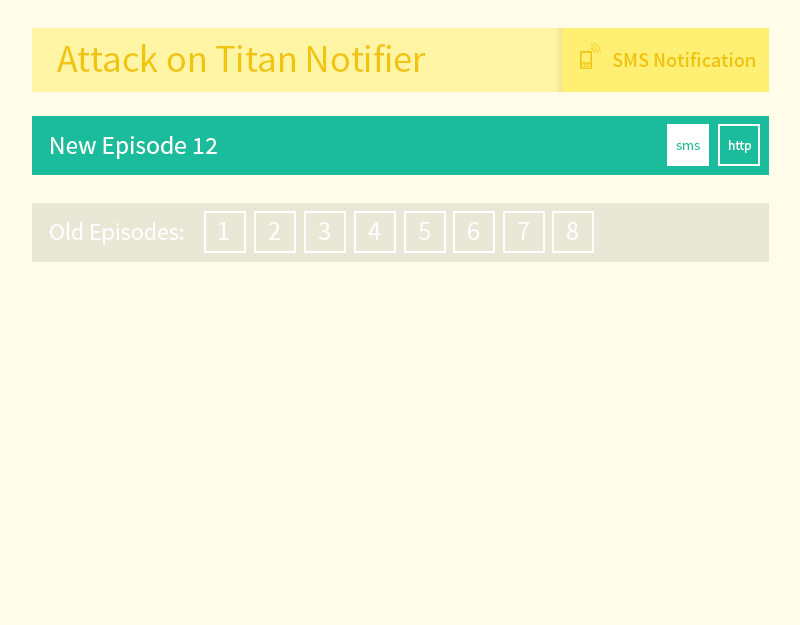
<style>
.page{position:relative;width:800px;height:625px;background:#fffde9}
.page>*{position:absolute;margin:0}
.t1{font:38.5px "SourceSansPro-Regular";color:#f1c40f}
.t2{font:20.3px "SourceSansPro-Semibold";color:#f1c40f}
.t3{font:25.2px "SourceSansPro-Regular";color:#ffffff}
.t4{font:14px "SourceSansPro-Regular";color:#1abc9c}
.t5{font:14px "SourceSansPro-Regular";color:#ffffff;scale:0.94 1}
.t6{font:24.3px "SourceSansPro-Regular";color:#ffffff}
.t7{font:26.9px "SourceSansPro-Regular";color:#ffffff}
</style>
<div class="page">
<p class="t1" style="left:57px;top:44px;width:369px;height:28px">Attack on Titan Notifier</p>
<p class="t2" style="left:613px;top:52px;width:142px;height:15px">SMS Notification</p>
<p class="t3" style="left:51px;top:136px;width:166px;height:23px">New Episode 12</p>
<p class="t4" style="left:676px;top:143px;width:24px;height:7px">sms</p>
<p class="t5" style="left:729px;top:140px;width:22px;height:13px">http</p>
<p class="t6" style="left:50px;top:222px;width:134px;height:23px">Old Episodes:</p>
<p class="t7" style="left:219px;top:222px;width:10px;height:18px">1</p>
<p class="t7" style="left:268px;top:222px;width:12px;height:18px">2</p>
<p class="t7" style="left:318px;top:222px;width:12px;height:18px">3</p>
<p class="t7" style="left:368px;top:222px;width:13px;height:18px">4</p>
<p class="t7" style="left:418px;top:222px;width:12px;height:18px">5</p>
<p class="t7" style="left:468px;top:222px;width:11px;height:18px">6</p>
<p class="t7" style="left:518px;top:222px;width:11px;height:18px">7</p>
<p class="t7" style="left:567px;top:222px;width:11px;height:18px">8</p>
</div>
